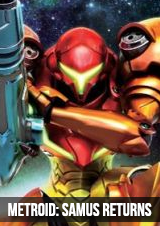
<style>
.page{position:relative;width:160px;height:226px}
.page>*{position:absolute;margin:0}
.t1{font:18px "BebasNeue";color:#ffffff}
</style>
<div class="page">
<p class="t1" style="left:8px;top:203px;width:144px;height:13px">Metroid: Samus Returns</p>
</div>
